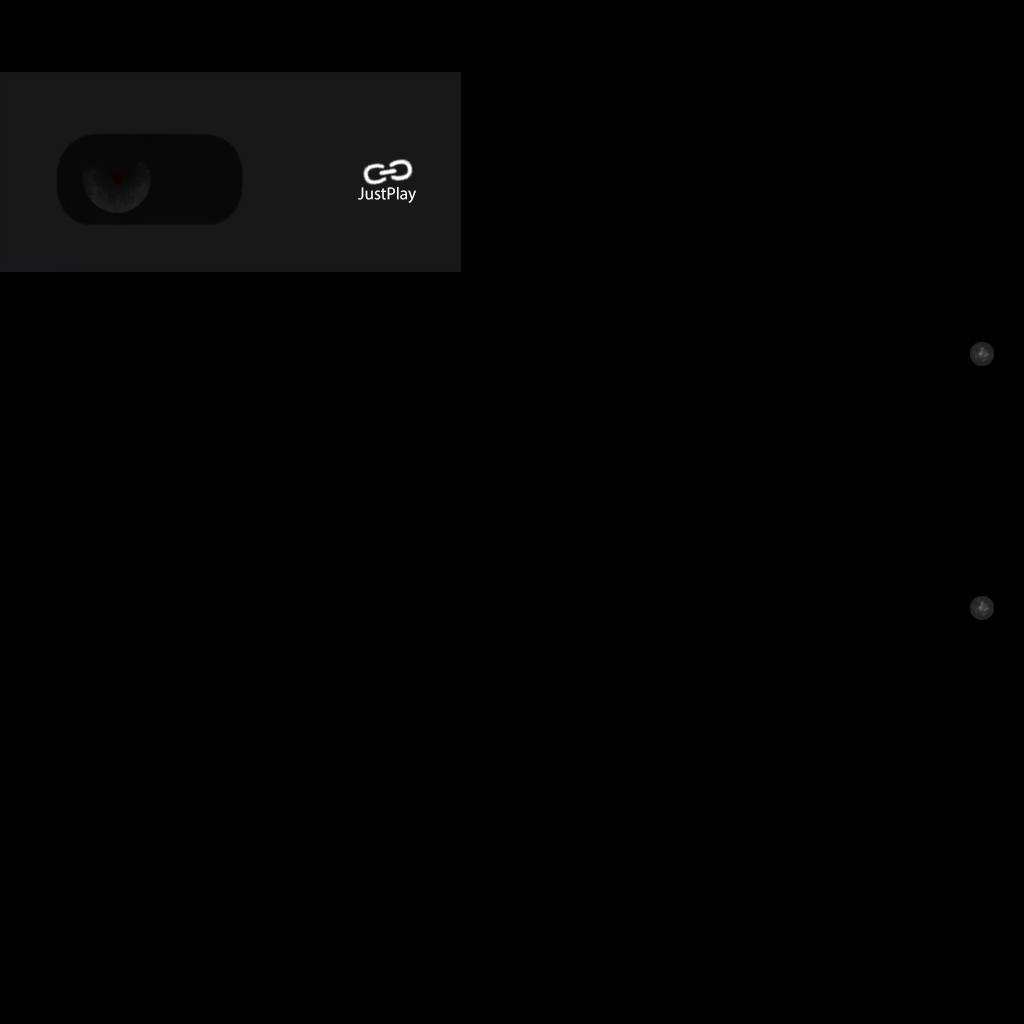
<style>
.page{position:relative;width:1024px;height:1024px;background:#000000}
.page>*{position:absolute;margin:0}
.t1{font:17.3px "MyriadPro-Regular";color:#ffffff}
</style>
<div class="page">
<p class="t1" style="left:358px;top:187px;width:58px;height:16px">JustPlay</p>
</div>
